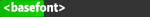
<style>
.page{position:relative;width:150px;height:17px;background:#333333}
.page>*{position:absolute;margin:0}
.t1{font:13px "SegoeUI-Bold";color:#ffffff;scale:0.88 1}
</style>
<div class="page">
<p class="t1" style="left:4px;top:1px;width:61px;height:11px">&lt;basefont&gt;</p>
</div>
